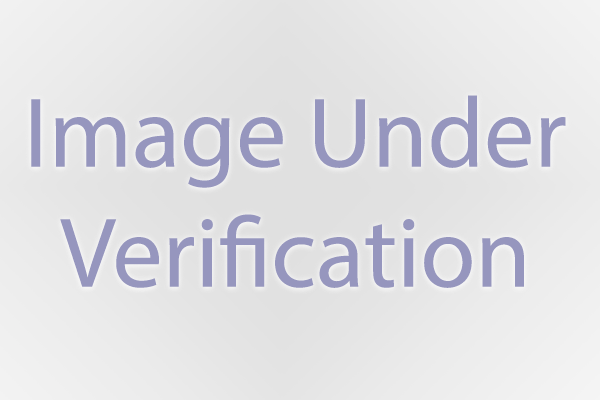
<style>
.page{position:relative;width:600px;height:400px}
.page>*{position:absolute;margin:0}
.t1{font:100px "MyriadPro-Regular";color:#9696be}
</style>
<div class="page">
<p class="t1" style="left:31px;top:95px;width:535px;height:193px;text-align:center">Image Under<br>Verification</p>
</div>
